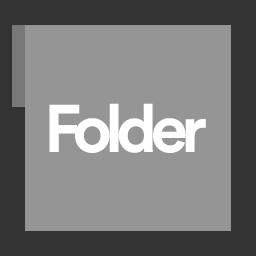
<style>
.page{position:relative;width:256px;height:256px;background:#959595}
.page>*{position:absolute;margin:0}
.t1{font:66.7px "Circular-Bold";letter-spacing:-0.1em;color:#ffffff}
</style>
<div class="page">
<p class="t1" style="left:49px;top:103px;width:157px;height:50px">Folder</p>
</div>
